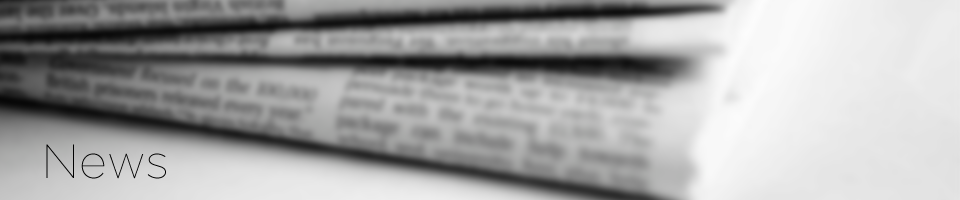
<style>
.page{position:relative;width:960px;height:200px}
.page>*{position:absolute;margin:0}
.t1{font:48px "Gotham-Thin";color:#000000}
</style>
<div class="page">
<p class="t1" style="left:46px;top:144px;width:120px;height:35px">News</p>
</div>
